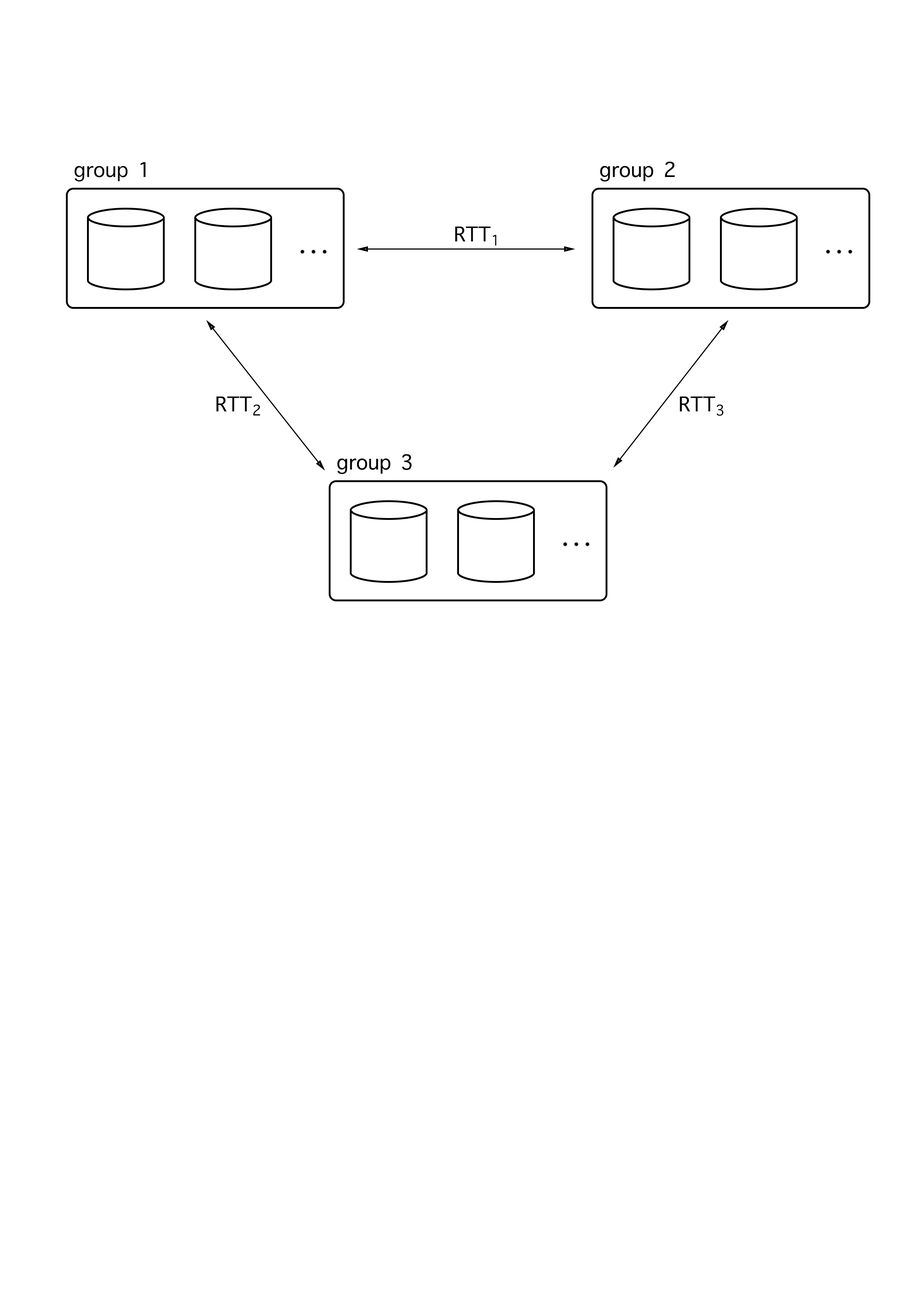
<style>
.page{position:relative;width:918px;height:1299px;background:#ffffff}
.page>*{position:absolute;margin:0}
.t1{font:27.8px "AppleSymbols";color:#000000}
</style>
<div class="page">
<p class="t1" style="left:74px;top:162px;width:71px;height:19px">group 1</p>
<p class="t1" style="left:455px;top:226px;width:41px;height:19px">RTT₁</p>
<p class="t1" style="left:216px;top:396px;width:44px;height:19px">RTT₂</p>
<p class="t1" style="left:680px;top:396px;width:44px;height:20px">RTT₃</p>
</div>
